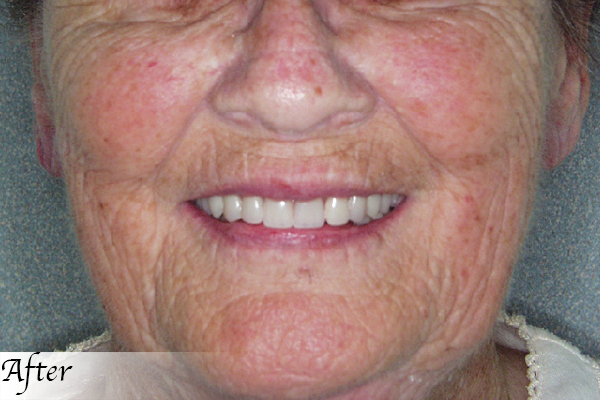
<style>
.page{position:relative;width:600px;height:400px}
.page>*{position:absolute;margin:0}
.t1{font:56px "Apple-Chancery";color:#000000}
</style>
<div class="page">
<p class="t1" style="left:2px;top:352px;width:71px;height:43px">After</p>
</div>
